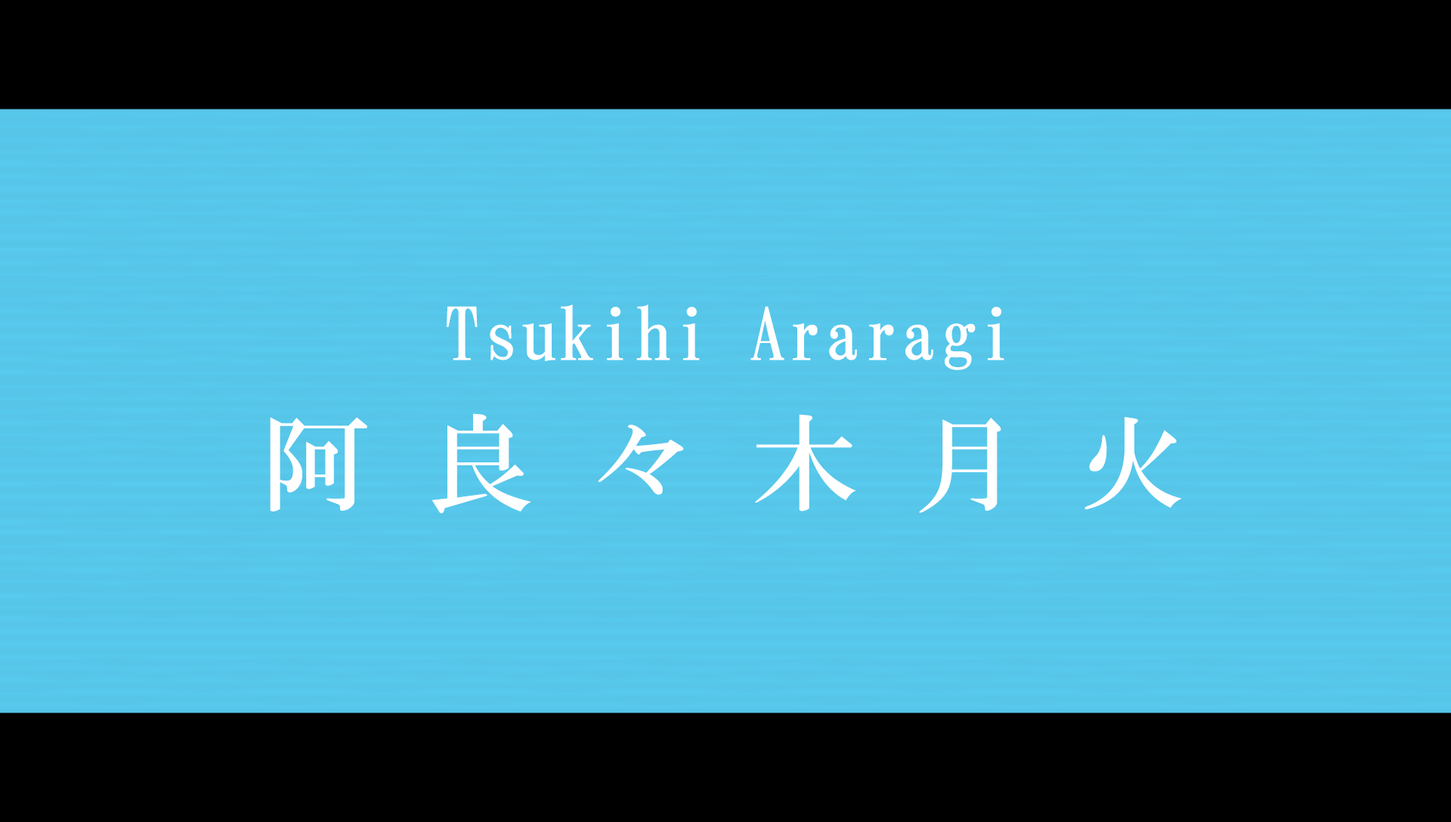
<style>
.page{position:relative;width:1451px;height:822px;background:#56c5e8}
.page>*{position:absolute;margin:0}
.t1{font:72.5px "HGMinchoB";letter-spacing:0.025em;color:#ffffff}
.t2{font:105.8px "HGMinchoB";letter-spacing:0.54em;color:#ffffff}
</style>
<div class="page">
<p class="t1" style="left:447px;top:304px;width:557px;height:66px">Tsukihi Araragi</p>
<p class="t2" style="left:270px;top:413px;width:912px;height:101px">阿良々木月火</p>
</div>
